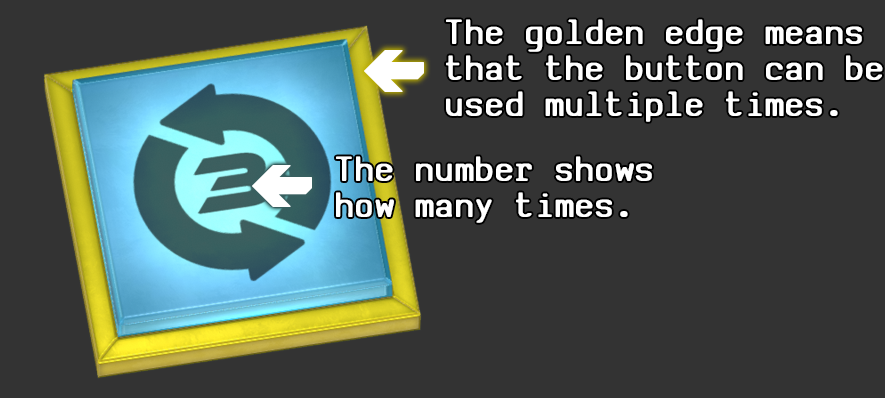
<style>
.page{position:relative;width:885px;height:398px;background:#333333}
.page>*{position:absolute;margin:0}
.t1{font:37.8px/36px "SVBasicManual-Bold";letter-spacing:0.05em;color:#ffffff;scale:0.95 1}
</style>
<div class="page">
<p class="t1" style="left:446px;top:19px;width:437px;height:103px">The golden edge means<br>that the button can be<br>used multiple times.</p>
<p class="t1" style="left:336px;top:156px;width:316px;height:67px">The number shows <br>how many times.</p>
</div>
